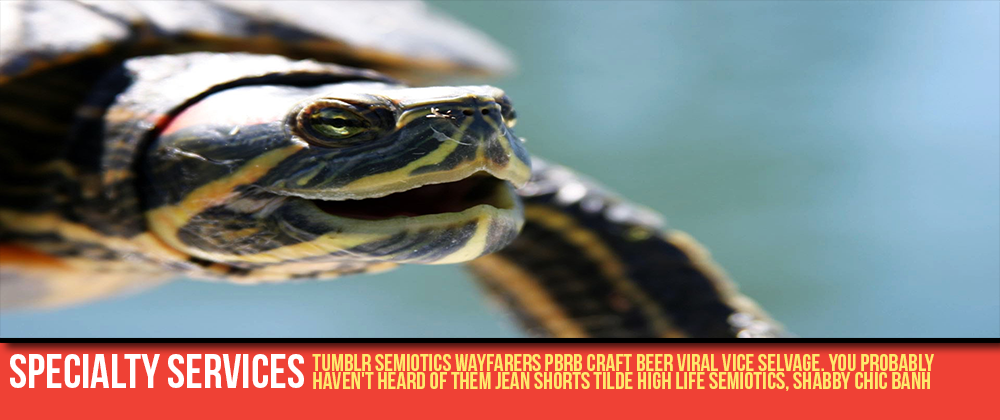
<style>
.page{position:relative;width:1000px;height:420px}
.page>*{position:absolute;margin:0}
.t1{font:48px "BebasNeue";color:#ffffff}
.t2{font:24px/18px "BebasNeue";color:#fee96c}
</style>
<div class="page">
<p class="t1" style="left:10px;top:354px;width:294px;height:34px">specialty services</p>
<p class="t2" style="left:312px;top:354px;width:622px;height:37px;text-align:right">Tumblr semiotics wayfarers PBRB craft beer viral Vice selvage. You probably <br>haven't heard of them jean shorts tilde High Life semiotics, shabby chic banh</p>
</div>
